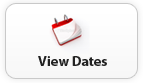
<style>
.page{position:relative;width:143px;height:83px}
.page>*{position:absolute;margin:0}
.t1{font:14px "MyriadPro-Bold";color:#222222}
</style>
<div class="page">
<p class="t1" style="left:38px;top:56px;width:69px;height:10px">View Dates</p>
</div>
